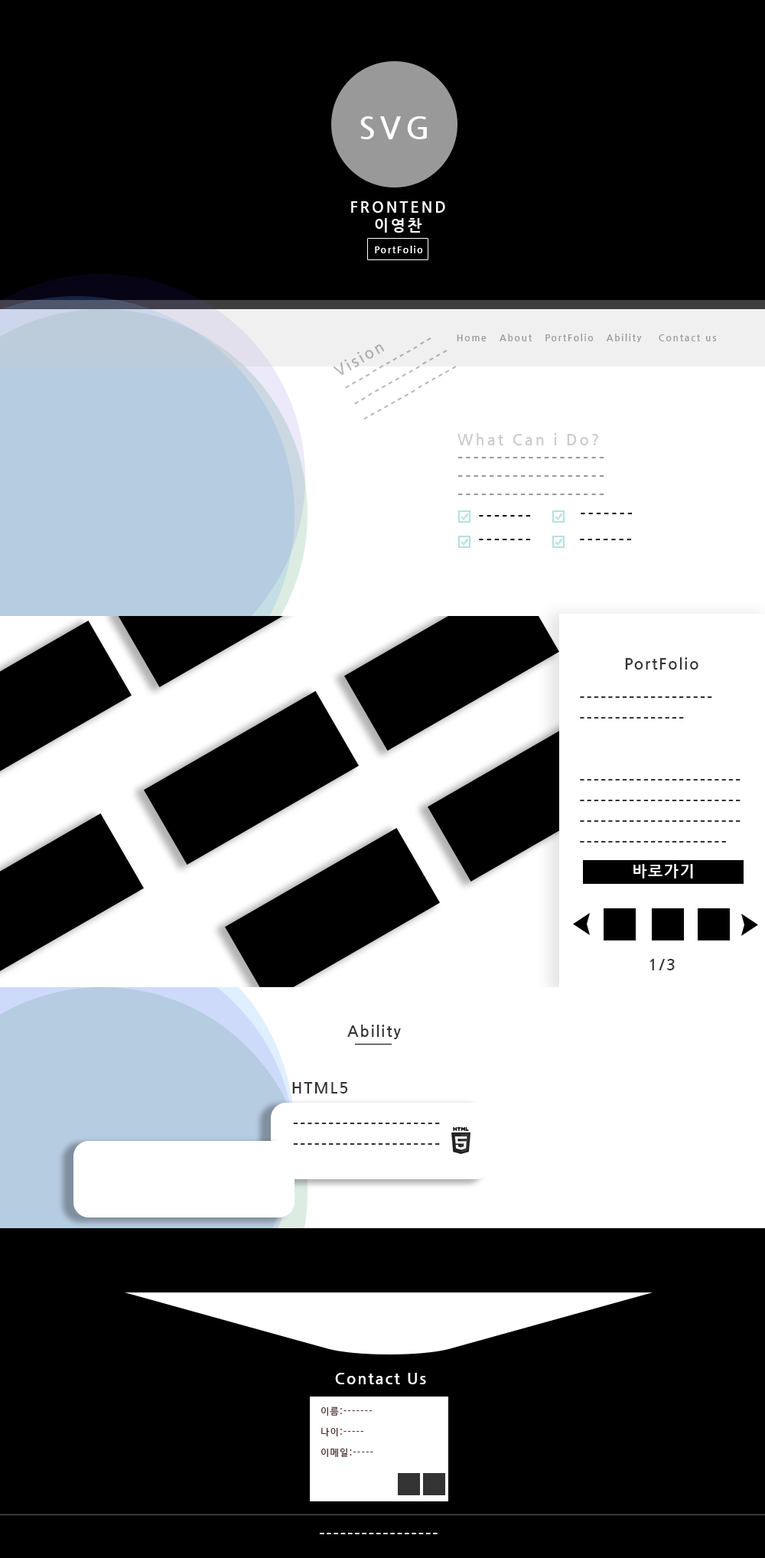
<style>
.page{position:relative;width:765px;height:1558px;background:#000000}
.page>*{position:absolute;margin:0}
.t1{font:30.6px "NanumGothicBold";letter-spacing:0.15em;color:#ffffff}
.t2{font:15.3px/18.4px "NanumGothicBold";letter-spacing:0.15em;color:#ffffff}
.t3{font:9.2px "NanumGothicBold";letter-spacing:0.15em;color:#ffffff}
.t4{font:15.3px/18.4px "NanumGothicBold";letter-spacing:0.15em;color:#b8b8b8}
.t5{font:9.2px "NanumGothicBold";letter-spacing:0.15em;color:#999999}
.t6{font:15.3px/18.4px "NanumGothicBold";letter-spacing:0.15em;color:#999999}
.t7{font:15.3px/18.4px "NanumGothicBold";letter-spacing:0.15em;color:#000000}
.t8{font:15.3px/18.4px "NanumGothicBold";letter-spacing:0.15em;color:#cccccc}
.t9{font:15.3px "NanumGothicBold";letter-spacing:0.15em;color:#000000}
.t10{font:15.3px "NanumGothicBold";letter-spacing:0.1em;color:#333333}
.t11{font:15.3px/20.7px "NanumGothicBold";letter-spacing:0.1em;color:#333333}
.t12{font:15.3px "NanumGothicBold";letter-spacing:0.1em;color:#ffffff}
.t13{font:9.2px/20.7px "NanumGothicBold";letter-spacing:0.1em;color:#523030}
</style>
<div class="page">
<p class="t1" style="left:360px;top:116px;width:67px;height:23px">SVG</p>
<p class="t2" style="left:351px;top:201px;width:94px;height:32px;text-align:center">FRONTEND<br>이영찬</p>
<p class="t3" style="left:375px;top:246px;width:48px;height:7px">PortFolio</p>
<p class="t4" style="left:333px;top:337px;width:124px;height:83px;rotate:-30deg">Vision<br>-------------<br>--------------<br>--------------</p>
<p class="t5" style="left:457px;top:334px;width:259px;height:8px">Home   About   PortFolio   Ability    Contact us</p>
<p class="t6" style="left:458px;top:433px;width:147px;height:62px"><span class="t7"><br></span><span class="t8">What Can i Do?<br></span>-------------------<br>-------------------<br>-------------------</p>
<p class="t9" style="left:479px;top:515px;width:52px;height:2px">-------</p>
<p class="t9" style="left:581px;top:513px;width:52px;height:1px">-------</p>
<p class="t9" style="left:479px;top:539px;width:52px;height:1px">-------</p>
<p class="t9" style="left:580px;top:539px;width:52px;height:1px">-------</p>
<p class="t10" style="left:625px;top:657px;width:74px;height:13px">PortFolio</p>
<p class="t11" style="left:580px;top:696px;width:161px;height:147px">-------------------<br>---------------<br><br><br>------------------------------------------------------------------------------------------</p>
<p class="t12" style="left:634px;top:864px;width:59px;height:15px">바로가기</p>
<p class="t10" style="left:650px;top:959px;width:25px;height:11px">1/3</p>
<p class="t10" style="left:347px;top:1025px;width:54px;height:14px">Ability</p>
<p class="t10" style="left:292px;top:1082px;width:55px;height:12px">HTML5</p>
<p class="t10" style="left:293px;top:1123px;width:147px;height:22px">----------------------------------------------</p>
<p class="t12" style="left:335px;top:1373px;width:91px;height:11px">Contact Us</p>
<p class="t13" style="left:321px;top:1407px;width:52px;height:50px">이름:-------<br>나이:-----<br>이메일:-----</p>
<p class="t12" style="left:320px;top:1533px;width:118px;height:1px">-----------------</p>
</div>
